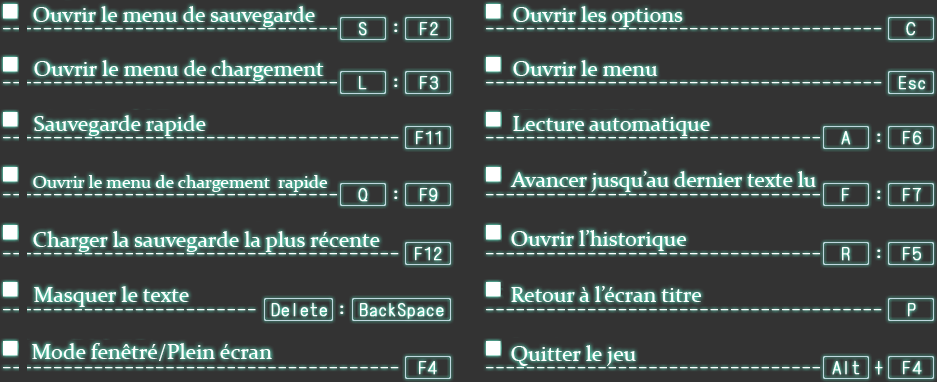
<style>
.page{position:relative;width:937px;height:382px;background:#333333}
.page>*{position:absolute;margin:0}
.t1{font:22px "Constantia";color:#ffffff}
.t2{font:22px "Constantia";letter-spacing:-0.005em;color:#ffffff}
.t3{font:18px "Constantia";color:#ffffff}
</style>
<div class="page">
<p class="t1" style="left:33px;top:6px;width:282px;height:21px">Ouvrir le menu de sauvegarde</p>
<p class="t1" style="left:513px;top:6px;width:170px;height:21px">Ouvrir les options</p>
<p class="t1" style="left:34px;top:60px;width:290px;height:21px">Ouvrir le menu de chargement</p>
<p class="t1" style="left:513px;top:60px;width:145px;height:16px">Ouvrir le menu</p>
<p class="t1" style="left:34px;top:115px;width:172px;height:21px">Sauvegarde rapide</p>
<p class="t1" style="left:513px;top:116px;width:197px;height:20px">Lecture automatique</p>
<p class="t2" style="left:510px;top:171px;width:306px;height:21px">Avancer jusqu’au dernier texte lu</p>
<p class="t3" style="left:33px;top:175px;width:295px;height:17px">Ouvrir le menu de chargement  rapide</p>
<p class="t1" style="left:33px;top:231px;width:347px;height:21px">Charger la sauvegarde la plus récente</p>
<p class="t1" style="left:511px;top:230px;width:176px;height:21px">Ouvrir l’historique</p>
<p class="t1" style="left:34px;top:286px;width:155px;height:21px">Masquer le texte</p>
<p class="t1" style="left:32px;top:343px;width:240px;height:18px">Mode fenêtré/Plein écran</p>
<p class="t1" style="left:511px;top:345px;width:125px;height:21px">Quitter le jeu</p>
</div>
